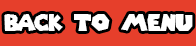
<style>
.page{position:relative;width:196px;height:46px;background:#e63f2b}
.page>*{position:absolute;margin:0}
.t1{font:22.9px "SuperMarioGalaxy";color:#ffffff}
</style>
<div class="page">
<p class="t1" style="left:4px;top:14px;width:189px;height:17px">Back to Menu</p>
</div>
